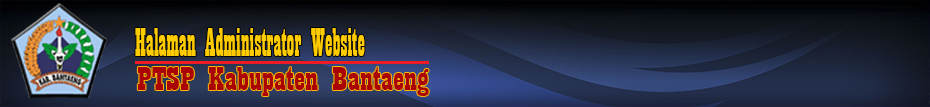
<style>
.page{position:relative;width:930px;height:107px}
.page>*{position:absolute;margin:0}
.t1{font:41.6px "Playbill";color:#ffcc00;scale:0.76 1}
.t2{font:35.2px "Playbill";color:#a90303;scale:1.34 1}
</style>
<div class="page">
<p class="t1" style="left:135px;top:28px;width:230px;height:28px">Halaman Administrator Website</p>
<p class="t2" style="left:137px;top:67px;width:292px;height:29px">PTSP Kabupaten Bantaeng</p>
</div>
